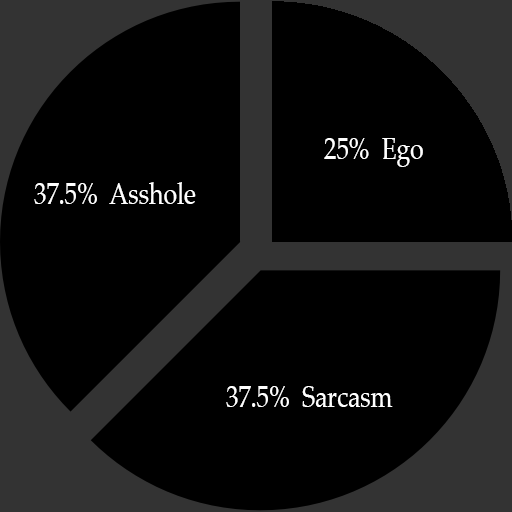
<style>
.page{position:relative;width:512px;height:512px;background:#000000}
.page>*{position:absolute;margin:0}
.t1{font:30px "PalatinoLinotype-Roman";color:#ffffff;scale:0.82 1}
</style>
<div class="page">
<p class="t1" style="left:324px;top:138px;width:99px;height:29px">25%  Ego</p>
<p class="t1" style="left:34px;top:182px;width:162px;height:22px">37.5%  Asshole</p>
<p class="t1" style="left:226px;top:386px;width:167px;height:21px">37.5%  Sarcasm</p>
</div>
